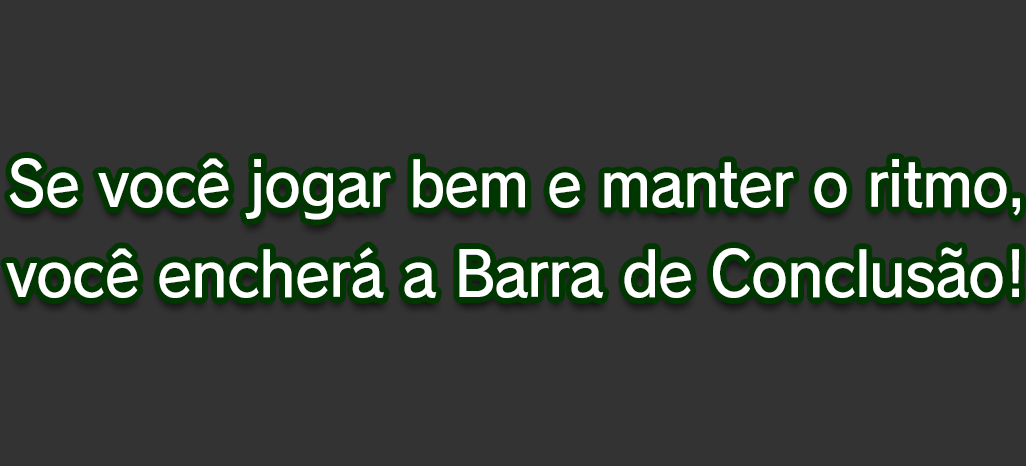
<style>
.page{position:relative;width:1026px;height:466px;background:#333333}
.page>*{position:absolute;margin:0}
.t1{font:61.3px/90.7px "RodinPro-DB";letter-spacing:-0.022em;color:#ffffff;scale:0.95 1}
</style>
<div class="page">
<p class="t1" style="left:6px;top:158px;width:1014px;height:140px;text-align:center">Se você jogar bem e manter o ritmo,<br>você encherá a Barra de Conclusão!</p>
</div>
